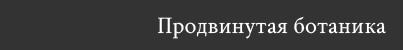
<style>
.page{position:relative;width:403px;height:50px;background:#333333}
.page>*{position:absolute;margin:0}
.t1{font:24px "CrimsonText-Regular";color:#ffffff}
</style>
<div class="page">
<p class="t1" style="left:158px;top:16px;width:228px;height:23px">Продвинутая ботаника</p>
</div>
